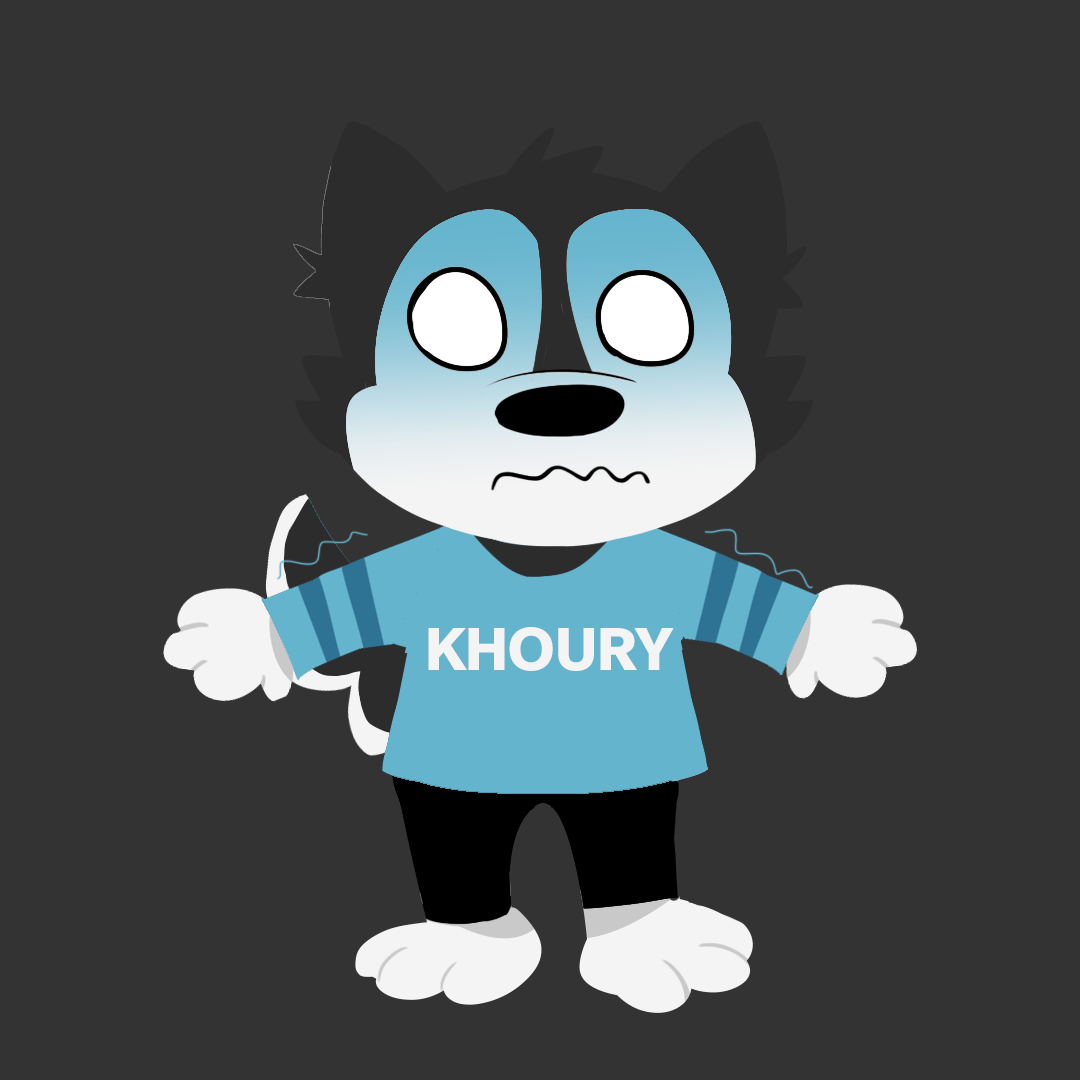
<style>
.page{position:relative;width:1080px;height:1080px;background:#333333}
.page>*{position:absolute;margin:0}
.t1{font:60px "RealHeadPro-Bold";color:#f4f4f4}
</style>
<div class="page">
<p class="t1" style="left:428px;top:627px;width:246px;height:44px">KHOURY</p>
</div>
